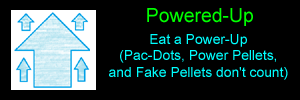
<style>
.page{position:relative;width:300px;height:100px;background:#000000}
.page>*{position:absolute;margin:0}
.t1{font:19.4px "ArialMT";color:#00ff00}
.t2{font:13.9px "ArialMT";color:#00ffff}
</style>
<div class="page">
<p class="t1" style="left:147px;top:8px;width:106px;height:18px">Powered-Up</p>
<p class="t2" style="left:109px;top:34px;width:179px;height:46px;text-align:center">Eat a Power-Up<br>(Pac-Dots, Power Pellets,<br>and Fake Pellets don't count)</p>
</div>
